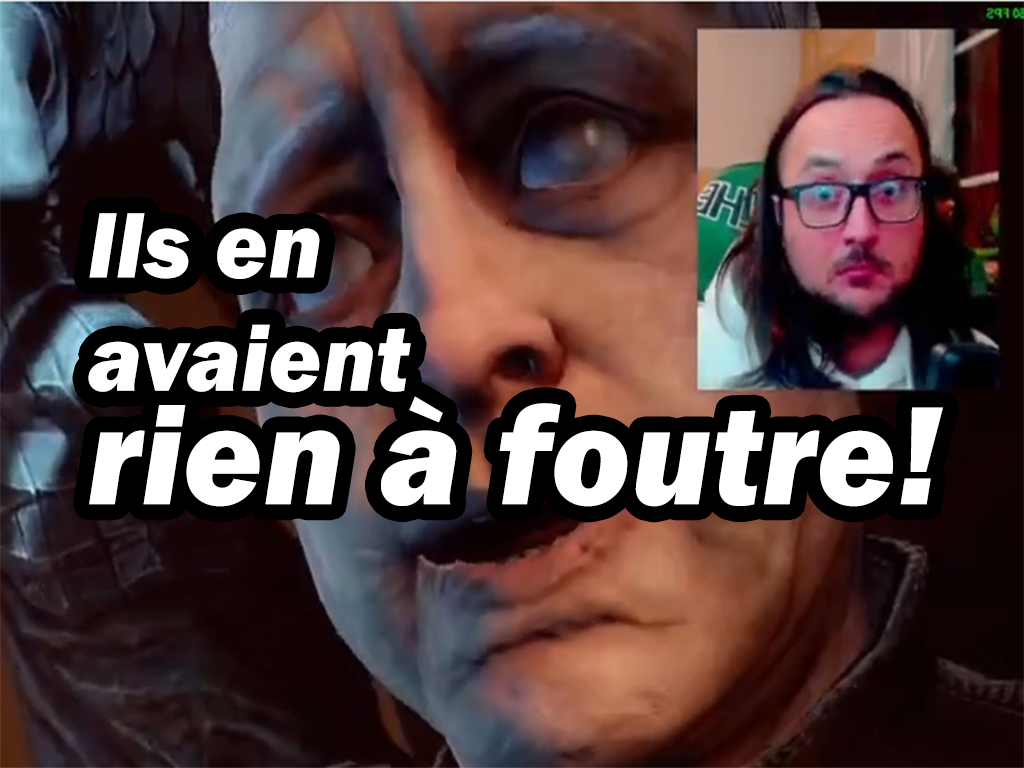
<style>
.page{position:relative;width:1024px;height:768px}
.page>*{position:absolute;margin:0}
.t1{font:96.5px/72.3px "FranklinGothic-HeavyItalic";letter-spacing:0.01em;color:#ffffff;scale:0.94 1}
.t2{font:144.7px/72.3px "FranklinGothic-HeavyItalic";letter-spacing:0.01em;color:#ffffff;scale:0.94 1}
</style>
<div class="page">
<p class="t1" style="left:88px;top:213px;width:855px;height:294px">Ils en <br>avaient<br><span class="t2">rien à foutre!</span></p>
</div>
